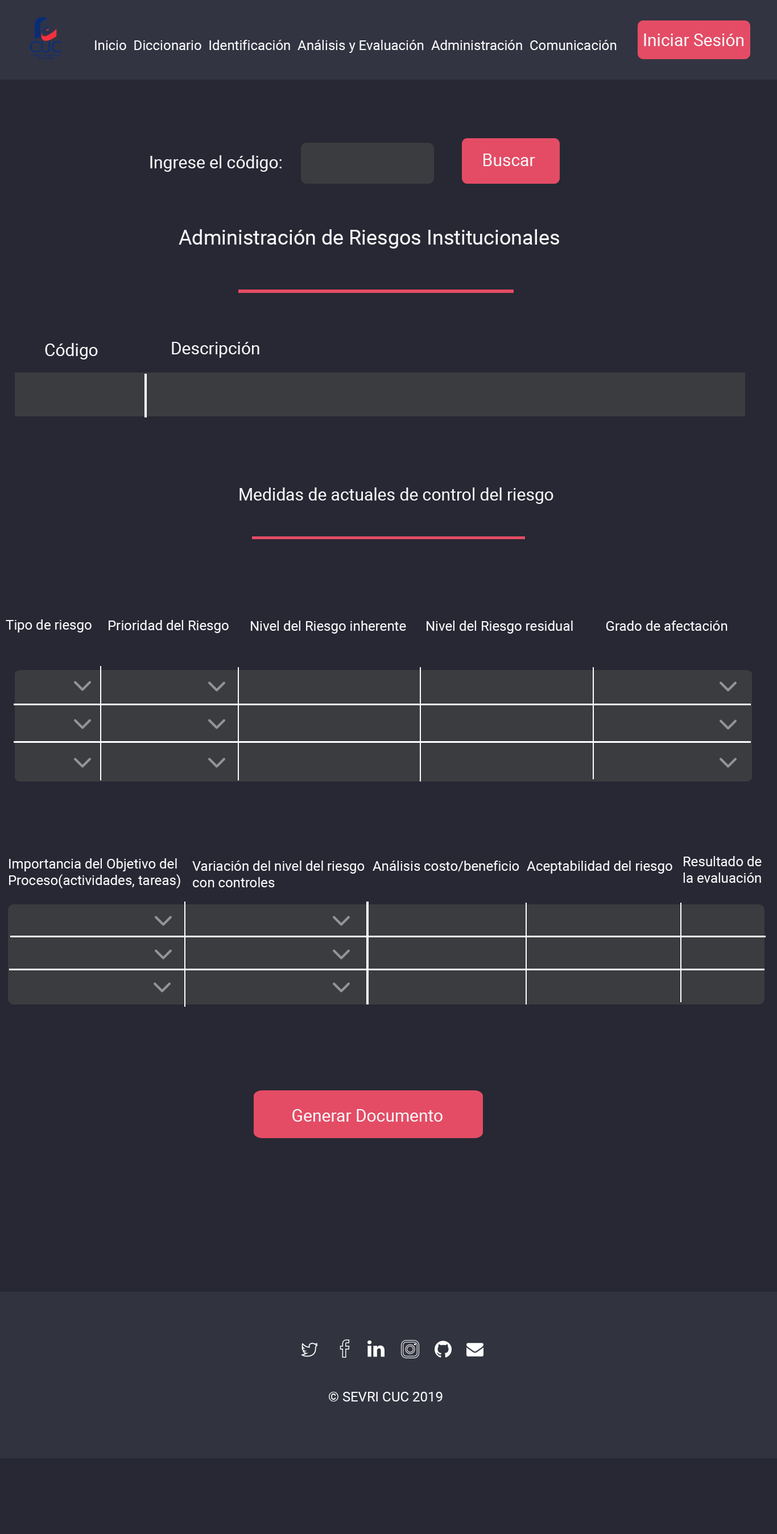
<style>
.page{position:relative;width:777px;height:1534px;background:#272833}
.page>*{position:absolute;margin:0}
.t1{font:13.7px "Roboto-Regular";color:#f6f6f9}
.t2{font:17.1px "Roboto-Regular";color:#f6f6f9}
.t3{font:20.5px "Roboto-Regular";color:#f6f6f9}
</style>
<div class="page">
<p class="t1" style="left:95px;top:40px;width:522px;height:13px">Inicio  Diccionario  Identificación  Análisis y Evaluación  Administración  Comunicación</p>
<p class="t2" style="left:644px;top:34px;width:100px;height:12px">Iniciar Sesión</p>
<p class="t2" style="left:150px;top:155px;width:132px;height:17px">Ingrese el código:</p>
<p class="t2" style="left:484px;top:154px;width:51px;height:12px">Buscar</p>
<p class="t3" style="left:179px;top:229px;width:380px;height:20px">Administración de Riesgos Institucionales</p>
<p class="t2" style="left:172px;top:342px;width:87px;height:16px">Descripción</p>
<p class="t2" style="left:45px;top:343px;width:53px;height:17px">Código</p>
<p class="t2" style="left:240px;top:488px;width:314px;height:16px">Medidas de actuales de control del riesgo</p>
<p class="t1" style="left:6px;top:620px;width:86px;height:13px">Tipo de riesgo</p>
<p class="t1" style="left:109px;top:620px;width:120px;height:13px">Prioridad del Riesgo</p>
<p class="t1" style="left:251px;top:621px;width:155px;height:13px">Nivel del Riesgo inherente</p>
<p class="t1" style="left:427px;top:621px;width:146px;height:13px">Nivel del Riesgo residual</p>
<p class="t1" style="left:606px;top:621px;width:122px;height:10px">Grado de afectación</p>
<p class="t1" style="left:683px;top:856px;width:79px;height:27px">Resultado de la evaluación</p>
<p class="t1" style="left:9px;top:859px;width:171px;height:30px">Importancia del Objetivo del Proceso(actividades, tareas)</p>
<p class="t1" style="left:192px;top:861px;width:173px;height:27px">Variación del nivel del riesgo con controles</p>
<p class="t1" style="left:373px;top:861px;width:146px;height:11px">Análisis costo/beneficio</p>
<p class="t1" style="left:527px;top:861px;width:145px;height:13px">Aceptabilidad del riesgo</p>
<p class="t2" style="left:292px;top:1109px;width:151px;height:13px">Generar Documento</p>
<p class="t1" style="left:329px;top:1392px;width:114px;height:10px">© SEVRI CUC 2019</p>
</div>
